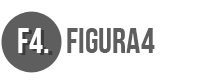
<style>
.page{position:relative;width:200px;height:80px;background:#ffffff}
.page>*{position:absolute;margin:0}
.t1{font:35px "BebasNeue";color:#ffffff}
.t2{font:35px "BebasNeue";color:#5e5e5e}
</style>
<div class="page">
<p class="t1" style="left:18px;top:28px;width:31px;height:25px">F4.</p>
<p class="t2" style="left:67px;top:28px;width:88px;height:25px">Figura4</p>
</div>
